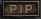
<style>
.page{position:relative;width:41px;height:19px}
.page>*{position:absolute;margin:0}
.t1{font:10.5px "Helvetica-Light";letter-spacing:0.2em;color:#8f7f6c;scale:1.11 1}
</style>
<div class="page">
<p class="t1" style="left:10px;top:5px;width:22px;height:8px">PIP</p>
</div>
